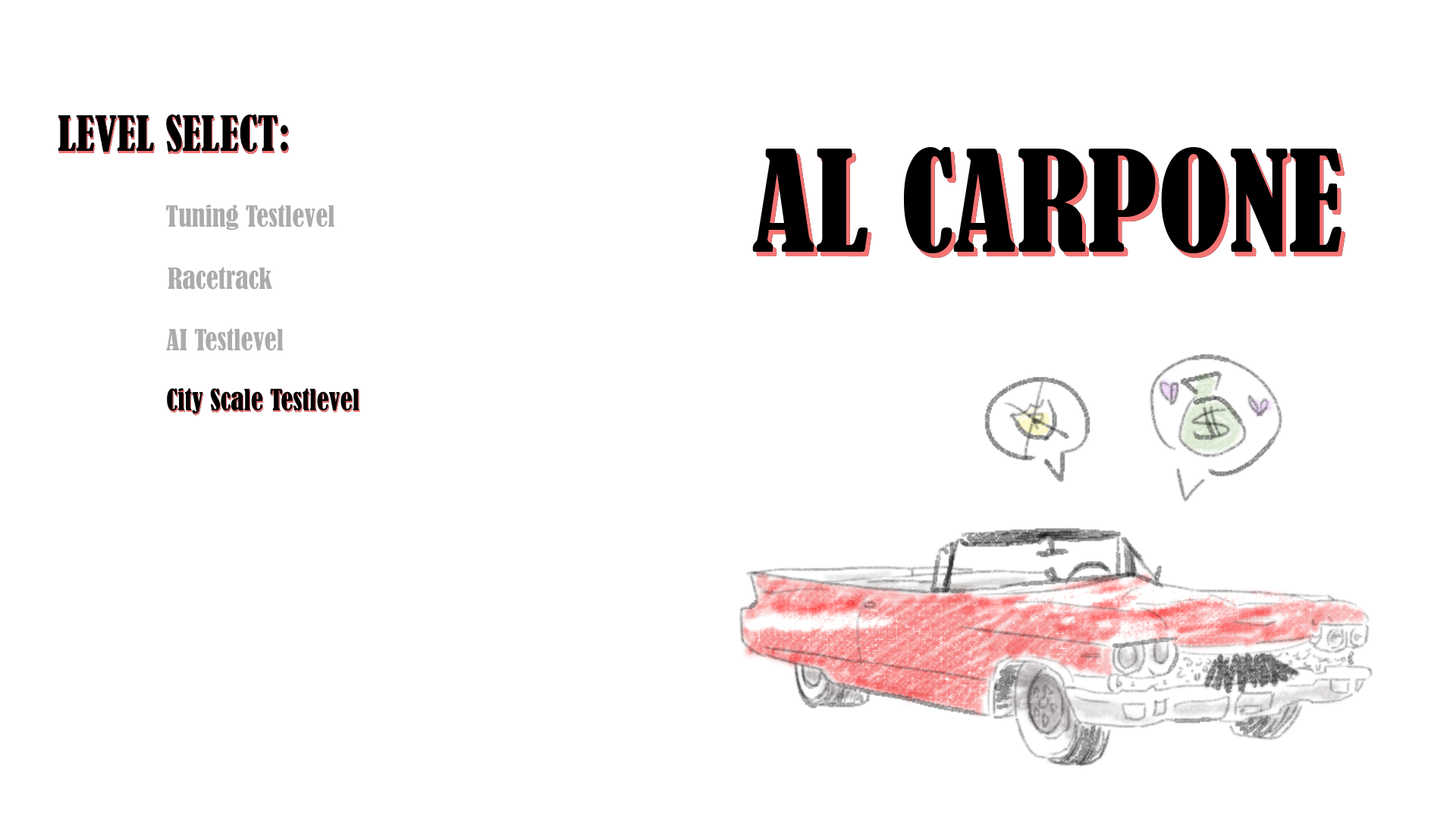
<style>
.page{position:relative;width:1456px;height:819px;background:#ffffff}
.page>*{position:absolute;margin:0}
.t1{font:45.5px "BernardMT-Condensed";color:#000000}
.t2{font:27.3px "BernardMT-Condensed";color:#ababab}
</style>
<div class="page">
<p class="t1" style="left:58px;top:115px;width:230px;height:37px">:LEVEL SELECT</p>
<p class="t2" style="left:166px;top:205px;width:168px;height:26px">Tuning Testlevel</p>
<p class="t2" style="left:168px;top:267px;width:104px;height:23px">Racetrack</p>
<p class="t2" style="left:166px;top:328px;width:118px;height:23px">AI Testlevel</p>
</div>
